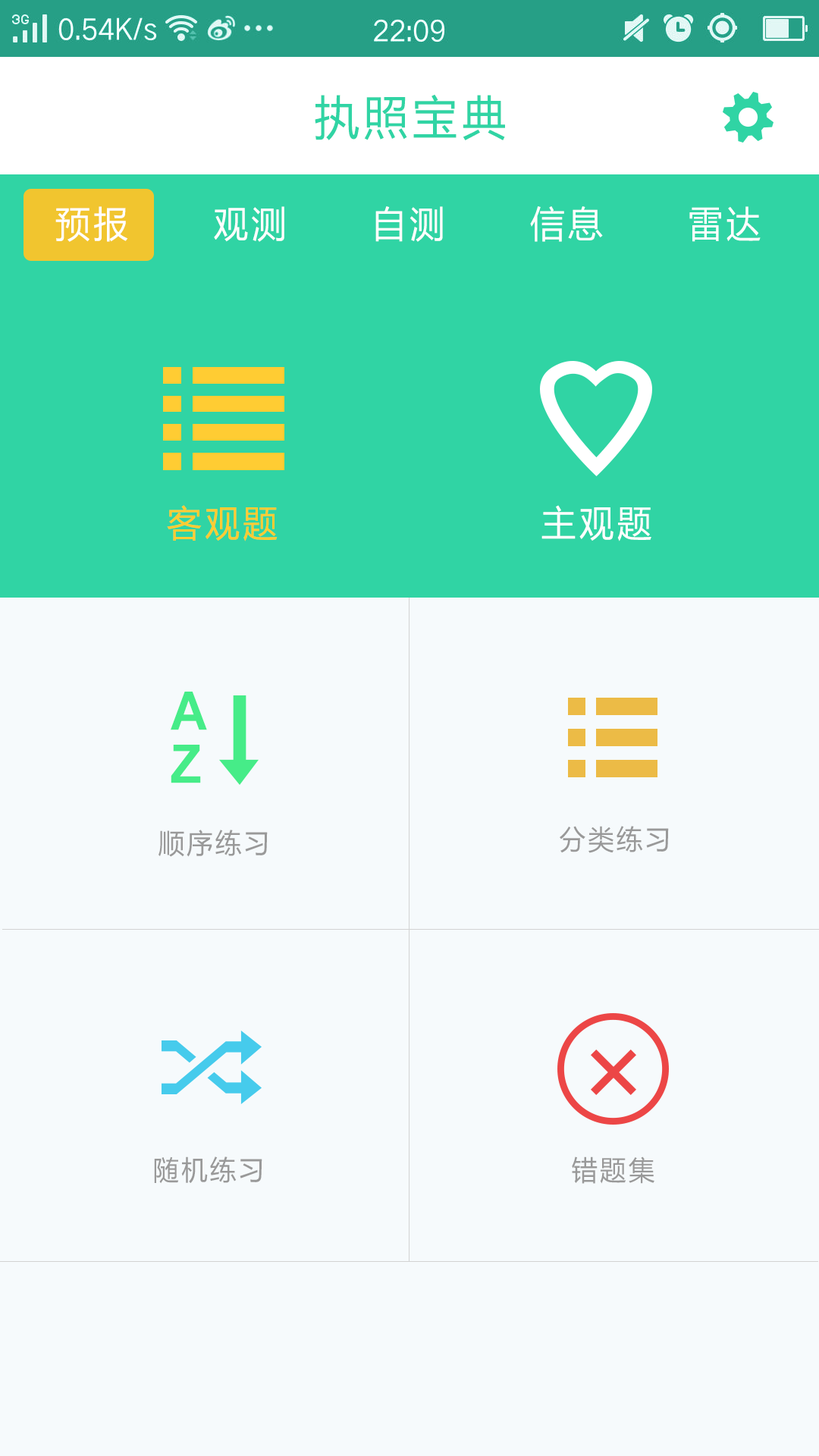
<style>
.page{position:relative;width:819px;height:1456px;background:#f6fafc}
.page>*{position:absolute;margin:0}
.t1{font:47px "MicrosoftYaHei";letter-spacing:0.1em;color:#30d4a4;scale:0.95 1}
.t2{font:36.4px "MicrosoftYaHei";letter-spacing:0.1em;color:#fffefe;scale:0.95 1}
.t3{font:36.4px "MicrosoftYaHei";letter-spacing:0.1em;color:#ffcc33;scale:0.95 1}
.t4{font:36.4px "MicrosoftYaHei";letter-spacing:0.1em;color:#ffffff;scale:0.95 1}
.t5{font:53.2px/53.2px "Arial-BoldMT";letter-spacing:0.1em;color:#46ec88;scale:0.95 1}
.t6{font:27.3px "MicrosoftYaHei";letter-spacing:0.1em;color:#999999;scale:0.95 1}
</style>
<div class="page">
<p class="t1" style="left:315px;top:94px;width:190px;height:46px">执照宝典</p>
<p class="t2" style="left:55px;top:206px;width:706px;height:36px">预报      观测      自测      信息      雷达</p>
<p class="t3" style="left:167px;top:505px;width:484px;height:36px">客观题<span class="t4">                   主观题</span></p>
<p class="t5" style="left:171px;top:692px;width:36px;height:91px">A<br>Z</p>
<p class="t6" style="left:158px;top:830px;width:110px;height:27px">顺序练习</p>
<p class="t6" style="left:560px;top:826px;width:109px;height:27px">分类练习</p>
<p class="t6" style="left:154px;top:1156px;width:108px;height:28px">随机练习</p>
<p class="t6" style="left:572px;top:1156px;width:82px;height:28px">错题集</p>
</div>
